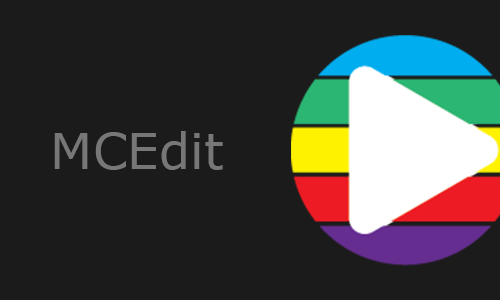
<style>
.page{position:relative;width:500px;height:300px;background:#1b1b1b}
.page>*{position:absolute;margin:0}
.t1{font:50px "Verdana";color:#777777}
</style>
<div class="page">
<p class="t1" style="left:54px;top:131px;width:169px;height:39px">MCEdit</p>
</div>
